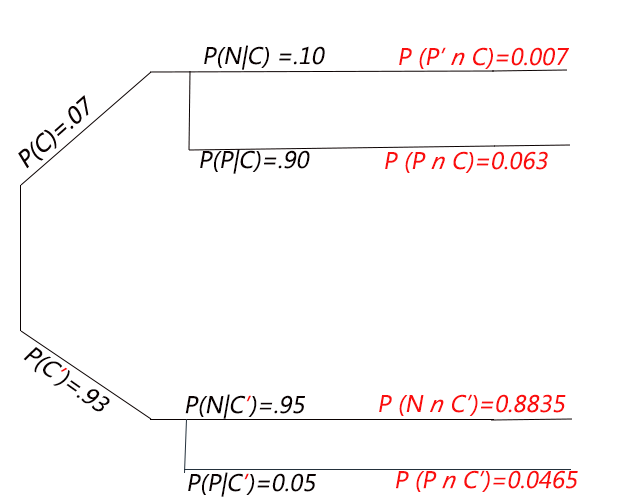
<style>
.page{position:relative;width:626px;height:500px;background:#ffffff}
.page>*{position:absolute;margin:0}
.t1{font:24px "SegoeUI";letter-spacing:0.005em;color:#0a0101;font-style:italic}
.t2{font:24px "SegoeUI";letter-spacing:0.005em;color:#fa0e0e;font-style:italic}
.t3{font:24px "SegoeUI-Italic";letter-spacing:0.005em;color:#fa0e0e;font-style:italic}
.t4{font:24px "SegoeUI";letter-spacing:0.005em;color:#f80f0f;font-style:italic}
</style>
<div class="page">
<p class="t1" style="left:204px;top:45px;width:121px;height:25px">P(N|C) =.10</p>
<p class="t2" style="left:399px;top:47px;width:170px;height:22px">P (P’ <span class="t3">n</span> C)=0.007</p>
<p class="t1" style="left:200px;top:149px;width:110px;height:25px">P(P|C<span class="t4">)</span>=.90</p>
<p class="t2" style="left:385px;top:151px;width:163px;height:22px">P (P <span class="t3">n</span> C)=0.063</p>
<p class="t1" style="left:23px;top:347px;width:87px;height:65px;rotate:35deg">P(C<span class="t4">’</span>)=.93</p>
<p class="t1" style="left:185px;top:394px;width:120px;height:25px">P(N|C<span class="t4">’</span>)=.95</p>
<p class="t2" style="left:379px;top:394px;width:187px;height:22px">P (N <span class="t3">n</span> C’)=0.8835</p>
<p class="t1" style="left:188px;top:472px;width:128px;height:25px">P(P|C<span class="t4">’</span>)=0.05</p>
<p class="t2" style="left:396px;top:470px;width:182px;height:22px">P (P <span class="t3">n</span> C’)=0.0465</p>
</div>
